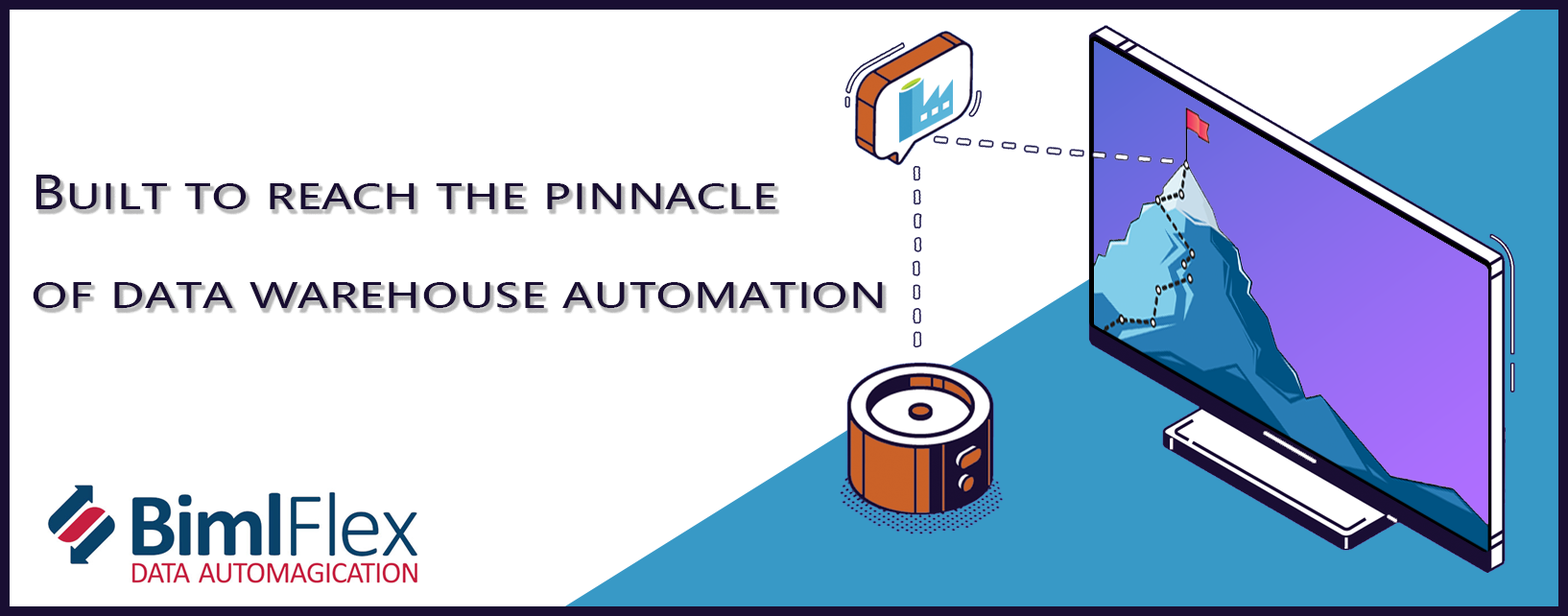
<style>
.page{position:relative;width:1568px;height:616px;background:#ffffff}
.page>*{position:absolute;margin:0}
.t1{font:48.1px/98.6px "SegoeUI";color:#190e32;font-variant:small-caps;scale:1.26 1}
</style>
<div class="page">
<p class="t1" style="left:33px;top:175px;width:850px;height:133px">Built to reach the pinnacle <br>of data warehouse automation</p>
</div>
